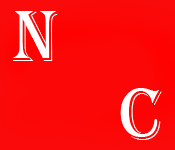
<style>
.page{position:relative;width:175px;height:150px;background:#fb0707}
.page>*{position:absolute;margin:0}
.t1{font:75px "Algerian";color:#ffffff}
</style>
<div class="page">
<p class="t1" style="left:12px;top:11px;width:46px;height:50px">n</p>
<p class="t1" style="left:120px;top:88px;width:42px;height:52px">C</p>
</div>
